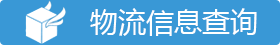
<style>
.page{position:relative;width:280px;height:45px;background:#3998d6}
.page>*{position:absolute;margin:0}
.t1{font:28px "MicrosoftYaHei";color:#ffffff}
</style>
<div class="page">
<p class="t1" style="left:90px;top:8px;width:167px;height:28px">物流信息查询</p>
</div>
